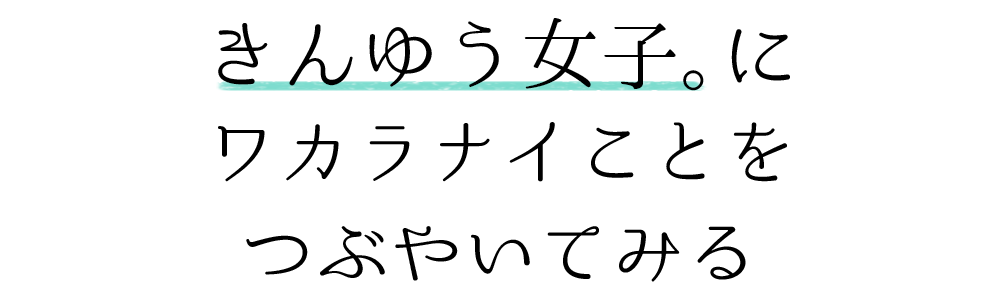
<style>
.page{position:relative;width:1000px;height:303px;background:#ffffff}
.page>*{position:absolute;margin:0}
.t1{font:74px/100px "02UtsukushiMincho";color:#000000}
.t2{font:80px/100px "02UtsukushiMincho";color:#000000}
.t3{font:80px/100px "02UtsukushiMincho";letter-spacing:-0.5em;color:#000000}
</style>
<div class="page">
<p class="t1" style="left:218px;top:18px;width:572px;height:264px;text-align:center"><span class="t2">きんゆう女子</span><span class="t3">。</span><span class="t2">に<br></span>ワカラナイことを<br>つぶやいてみる</p>
</div>
